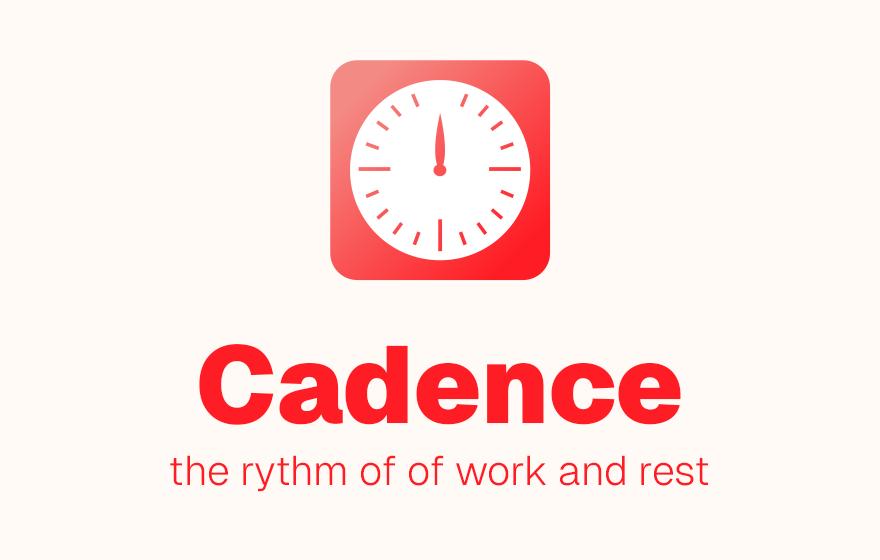
<style>
.page{position:relative;width:880px;height:560px;background:#fffaf5}
.page>*{position:absolute;margin:0}
.t1{font:108.7px "Geist-Black";color:#ff1d25}
.t2{font:41.2px "Geist-Light";color:#ff1d25}
</style>
<div class="page">
<p class="t1" style="left:199px;top:344px;width:482px;height:81px">Cadence</p>
<p class="t2" style="left:170px;top:455px;width:538px;height:37px">the rythm of of work and rest</p>
</div>
